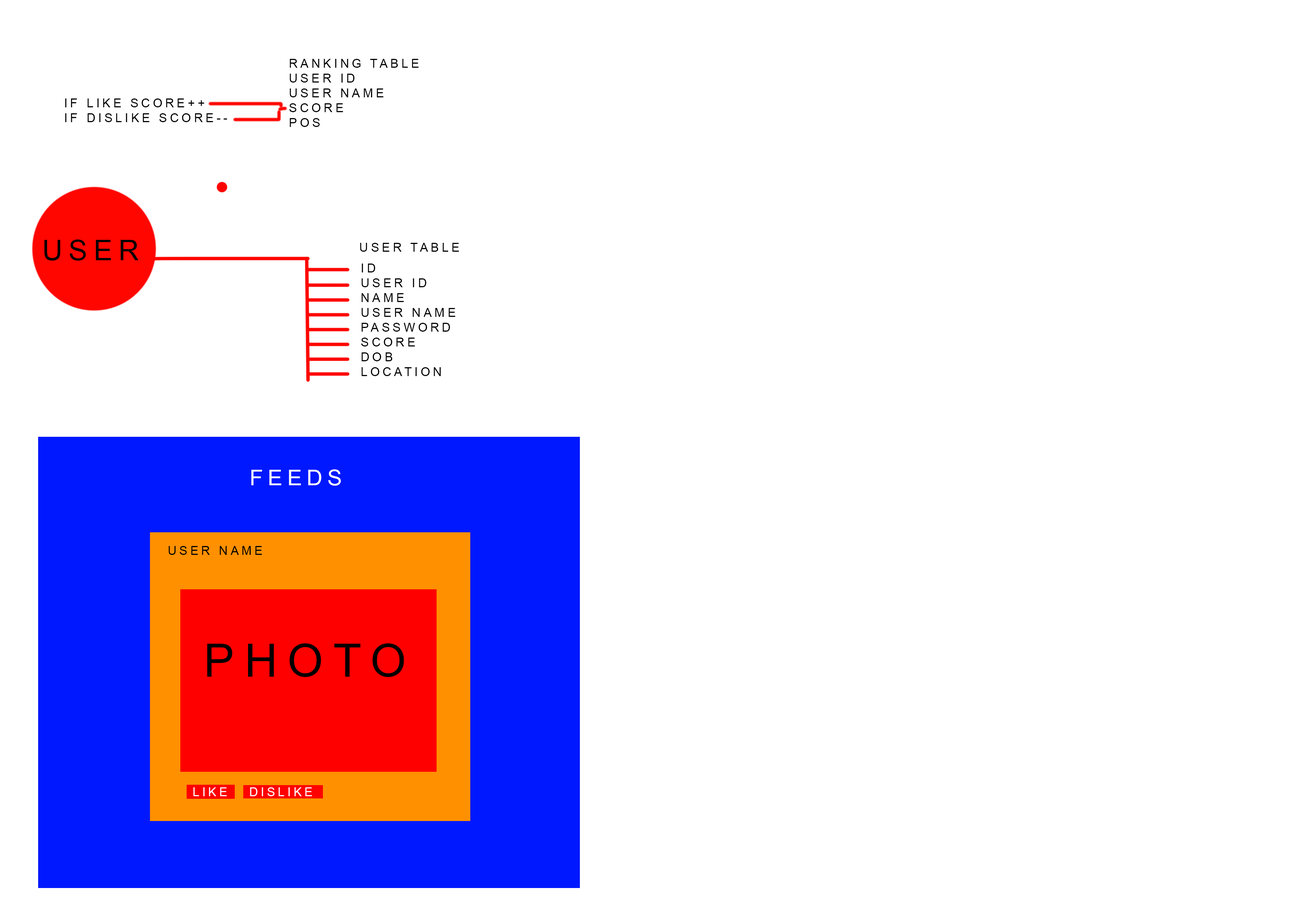
<style>
.page{position:relative;width:1299px;height:918px;background:#ffffff}
.page>*{position:absolute;margin:0}
.t1{font:12.3px "ArialMT";letter-spacing:0.22em;color:#000000;text-transform:uppercase}
.t2{font:28.1px "ArialMT";letter-spacing:0.22em;color:#000000;text-transform:uppercase}
.t3{font:22px "ArialMT";letter-spacing:0.22em;color:#ffffff;text-transform:uppercase}
.t4{font:45.8px "ArialMT";letter-spacing:0.22em;color:#000000;text-transform:uppercase}
.t5{font:12.3px "ArialMT";letter-spacing:0.22em;color:#ffffff;text-transform:uppercase}
</style>
<div class="page">
<p class="t1" style="left:289px;top:59px;width:130px;height:68px">Ranking table<br>user id<br>user name<br>score<br>pos</p>
<p class="t1" style="left:65px;top:98px;width:162px;height:24px">if like score++<br>if dislike score--</p>
<p class="t2" style="left:44px;top:240px;width:94px;height:21px">User</p>
<p class="t1" style="left:360px;top:243px;width:99px;height:9px">user table</p>
<p class="t1" style="left:361px;top:264px;width:94px;height:112px">Id<br>user ID<br>Name<br>User name<br>password<br>score<br>Dob<br>location</p>
<p class="t3" style="left:251px;top:469px;width:90px;height:17px">Feeds</p>
<p class="t1" style="left:168px;top:546px;width:94px;height:9px">user name</p>
<p class="t4" style="left:207px;top:643px;width:197px;height:34px">PHOTO</p>
<p class="t5" style="left:193px;top:787px;width:34px;height:9px">Like</p>
<p class="t5" style="left:193px;top:787px;width:34px;height:9px">Like</p>
<p class="t5" style="left:250px;top:787px;width:62px;height:9px">Dislike</p>
</div>
